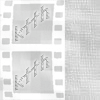
<style>
.page{position:relative;width:100px;height:100px}
.page>*{position:absolute;margin:0}
.t1{font:22.5px "HP-Yard-Regular";scale:0.8 1}
</style>
<div class="page">
<p class="t1" style="left:15px;top:5px;width:35px;height:37px">ktth</p>
<p class="t1" style="left:15px;top:54px;width:35px;height:37px">ktth</p>
</div>
